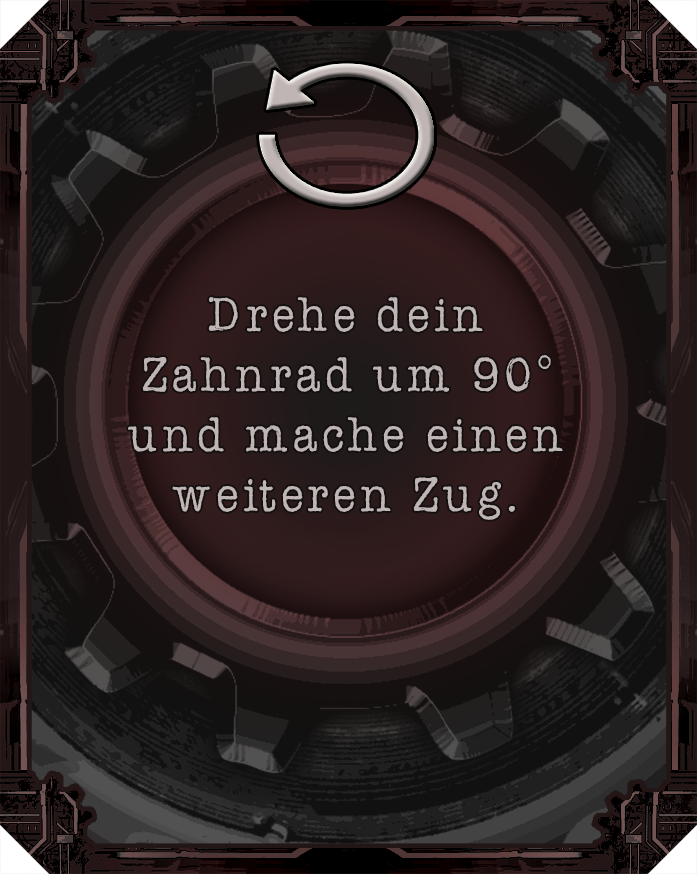
<style>
.page{position:relative;width:697px;height:874px}
.page>*{position:absolute;margin:0}
.t1{font:50px "AmerTypewriterITCbyBT-Medium";letter-spacing:0.02em;color:#c0b5b5}
</style>
<div class="page">
<p class="t1" style="left:128px;top:297px;width:435px;height:223px;text-align:center">Drehe dein Zahnrad um 90°  und mache einen weiteren Zug.</p>
</div>
